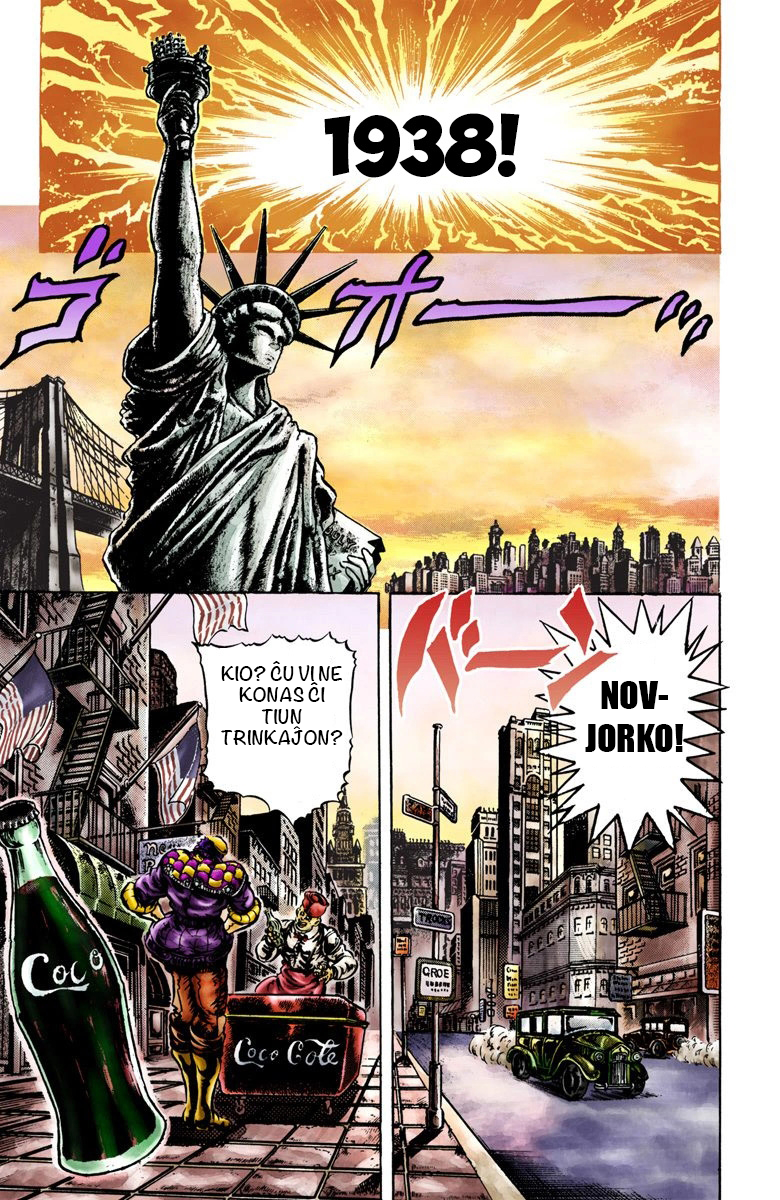
<style>
.page{position:relative;width:780px;height:1200px}
.page>*{position:absolute;margin:0}
.t1{font:18px "Noteworthy-Bold";color:#000000}
.t2{font:36px "Impact";color:#000000}
</style>
<div class="page">
<p class="t1" style="left:221px;top:661px;width:122px;height:84px;text-align:center">KIO? ĈU VI NE KONAS ĈI TIUN TRINKAĴON?</p>
<p class="t2" style="left:585px;top:681px;width:99px;height:71px;text-align:center">NOV-<br>JORKO!</p>
</div>
